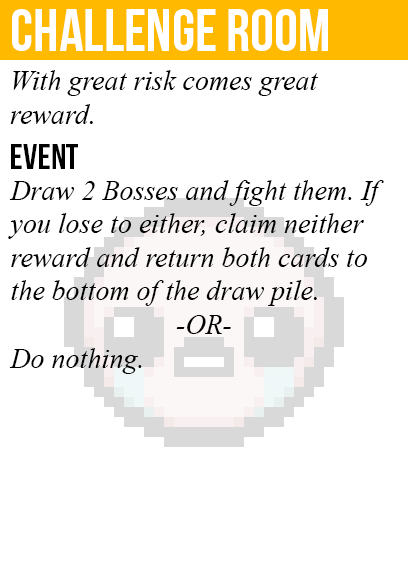
<style>
.page{position:relative;width:408px;height:585px;background:#ffffff}
.page>*{position:absolute;margin:0}
.t1{font:60px "BebasNeue";color:#ffffff}
.t2{font:28px "TimesNewRomanPS-ItalicMT";color:#000000}
.t3{font:36px "BebasNeue";color:#000000}
</style>
<div class="page">
<p class="t1" style="left:12px;top:9px;width:316px;height:42px">challenge room</p>
<p class="t2" style="left:10px;top:70px;width:308px;height:54px">With great risk comes great<br>reward.</p>
<p class="t3" style="left:11px;top:144px;width:67px;height:25px">event</p>
<p class="t2" style="left:8px;top:180px;width:376px;height:194px">Draw 2 Bosses and fight them. If<br>you lose to either, claim neither<br>reward and return both cards to<br>the bottom of the draw pile.<br><br>Do nothing.</p>
<p class="t2" style="left:176px;top:315px;width:55px;height:19px">-OR-</p>
</div>
